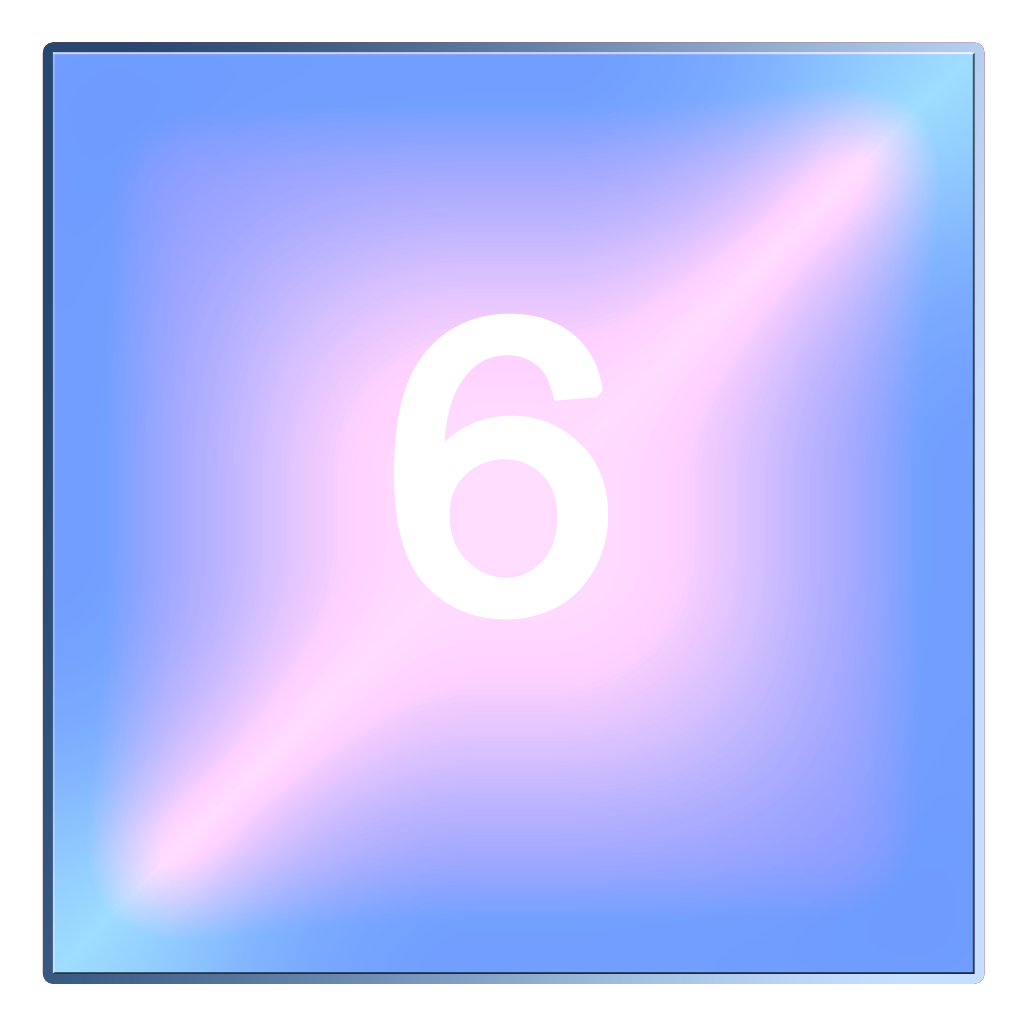
<style>
.page{position:relative;width:1024px;height:1024px}
.page>*{position:absolute;margin:0}
.t1{font:400px "ArialNarrow";color:#ffffff;font-weight:bold;scale:1.3 1}
</style>
<div class="page">
<p class="t1" style="left:394px;top:313px;width:215px;height:307px">6</p>
</div>
